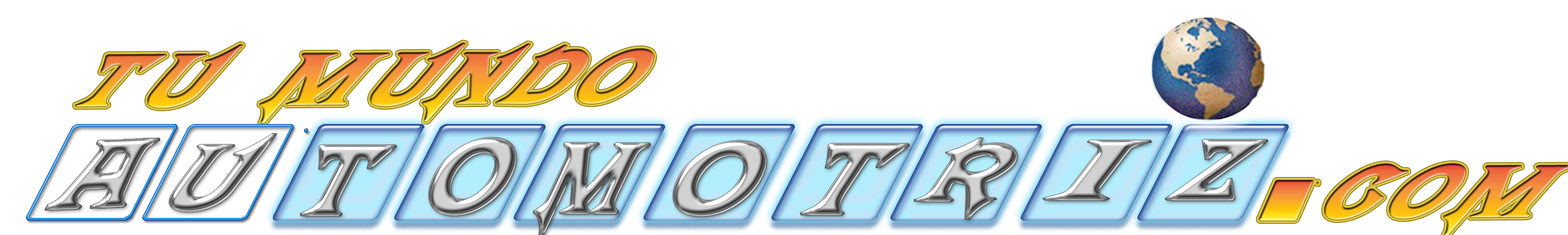
<style>
.page{position:relative;width:1568px;height:235px;background:#ffffff}
.page>*{position:absolute;margin:0}
.t1{font:97.8px "Mephisto";letter-spacing:0.05em;text-transform:uppercase;font-weight:bold;font-style:italic;scale:1.05 1}
.t2{font:115.1px "Mephisto";letter-spacing:0.05em;text-transform:uppercase;font-weight:bold;font-style:italic;scale:1.07 1}
.t3{font:119.6px "Mephisto";letter-spacing:0.05em;text-transform:uppercase;font-weight:bold;font-style:italic;scale:1.18 1}
.t4{font:94.5px "Mephisto";letter-spacing:0.05em;text-transform:uppercase;font-weight:bold;font-style:italic;scale:1.39 1}
.t5{font:117px "Mephisto";letter-spacing:0.05em;text-transform:uppercase;font-weight:bold;font-style:italic;scale:1.13 1}
.t6{font:116.9px "Mephisto";letter-spacing:0.05em;text-transform:uppercase;font-weight:bold;font-style:italic;scale:0.87 1}
.t7{font:116.2px "Mephisto";letter-spacing:0.05em;text-transform:uppercase;font-weight:bold;font-style:italic;scale:1.3 1}
.t8{font:123px "Mephisto";letter-spacing:0.05em;text-transform:uppercase;font-weight:bold;font-style:italic;scale:1.13 1}
.t9{font:100.1px "Mephisto";letter-spacing:0.05em;text-transform:uppercase;font-weight:bold;font-style:italic;scale:2.27 1}
.t10{font:99.5px "Mephisto";letter-spacing:0.05em;text-transform:uppercase;font-weight:bold;font-style:italic;scale:1.26 1}
</style>
<div class="page">
<p class="t1" style="left:75px;top:43px;width:579px;height:80px">tu mundo</p>
<p class="t2" style="left:169px;top:133px;width:108px;height:78px">U</p>
<p class="t3" style="left:429px;top:137px;width:87px;height:79px">O</p>
<p class="t4" style="left:914px;top:137px;width:103px;height:83px">R</p>
<p class="t5" style="left:300px;top:145px;width:97px;height:71px">T</p>
<p class="t6" style="left:533px;top:142px;width:118px;height:93px">M</p>
<p class="t7" style="left:673px;top:140px;width:93px;height:76px">O</p>
<p class="t8" style="left:800px;top:143px;width:110px;height:72px">T</p>
<p class="t9" style="left:1043px;top:140px;width:109px;height:60px">I</p>
<p class="t10" style="left:1165px;top:139px;width:103px;height:61px">Z</p>
<p class="t1" style="left:1324px;top:163px;width:244px;height:72px">COM</p>
</div>
